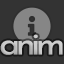
<style>
.page{position:relative;width:64px;height:64px;background:#333333}
.page>*{position:absolute;margin:0}
.t1{font:32px "JosefinSans-Regular";letter-spacing:-0.125em;color:#cbcbcb;scale:1.12 1}
</style>
<div class="page">
<p class="t1" style="left:0px;top:34px;width:63px;height:21px">anim</p>
</div>
